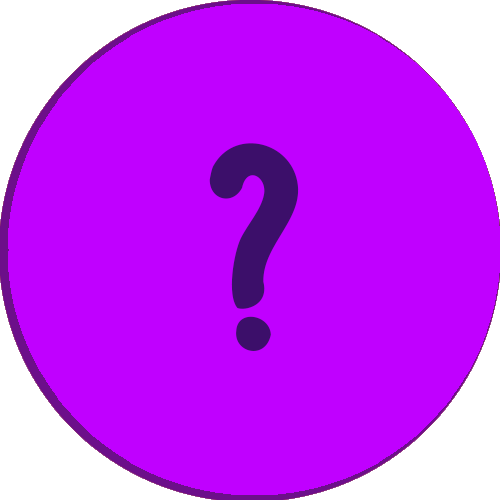
<style>
.page{position:relative;width:500px;height:500px;background:#c000ff}
.page>*{position:absolute;margin:0}
.t1{font:288px "DKGrumpyTiger-Regular";color:#3c0f6a}
</style>
<div class="page">
<p class="t1" style="left:209px;top:143px;width:90px;height:208px">?</p>
</div>
